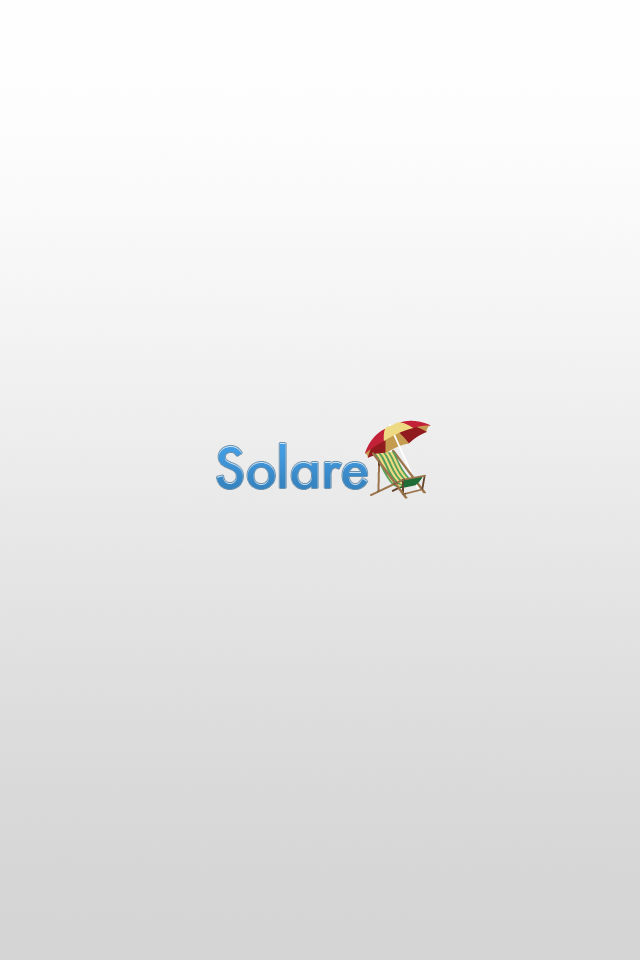
<style>
.page{position:relative;width:640px;height:960px}
.page>*{position:absolute;margin:0}
.t1{font:53.5px "Futura-Medium";letter-spacing:-0.01em;color:#3b8dce}
</style>
<div class="page">
<p class="t1" style="left:216px;top:443px;width:152px;height:46px">Solare</p>
</div>
